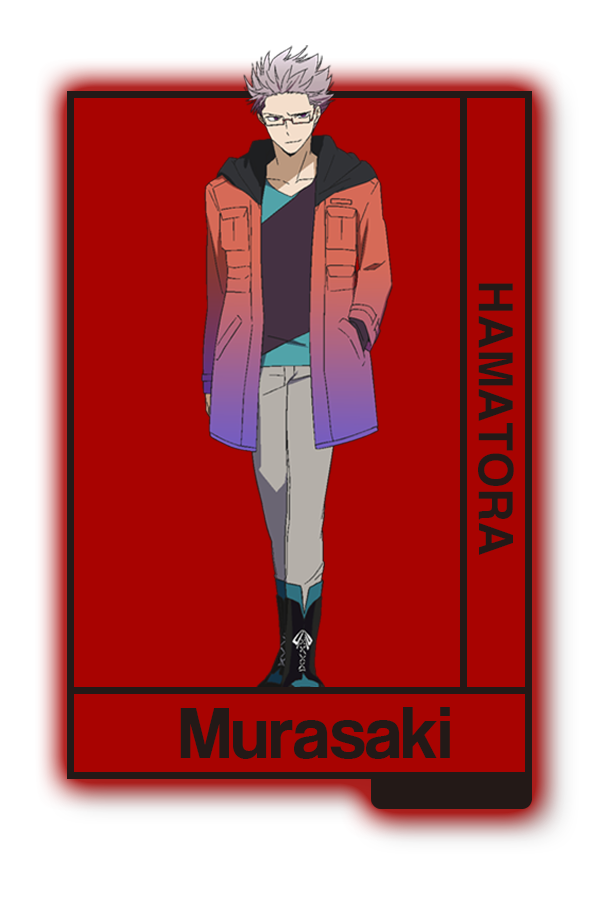
<style>
.page{position:relative;width:600px;height:900px;background:#a80301}
.page>*{position:absolute;margin:0}
.t1{font:47.4px "Helvetica-Bold";color:#231917}
.t2{font:75px "CoolveticaRg-Regular";color:#231917}
</style>
<div class="page">
<p class="t1" style="left:478px;top:283px;width:36px;height:272px;rotate:90deg">HAMATORA</p>
<p class="t2" style="left:180px;top:707px;width:270px;height:52px">Murasaki</p>
</div>
